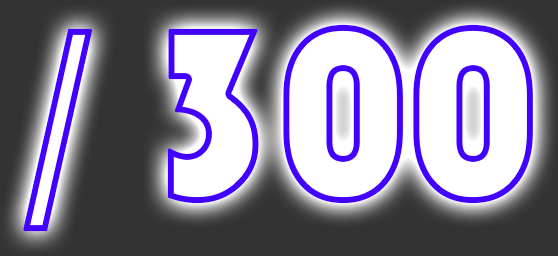
<style>
.page{position:relative;width:558px;height:256px;background:#ffffff}
.page>*{position:absolute;margin:0}
.t1{font:60.5px "Bauhaus93";letter-spacing:-0.07em;color:#ffffff;font-weight:bold}
</style>
<div class="page">
<p class="t1" style="left:23px;top:24px;width:510px;height:208px;text-align:center">/ 300</p>
</div>
